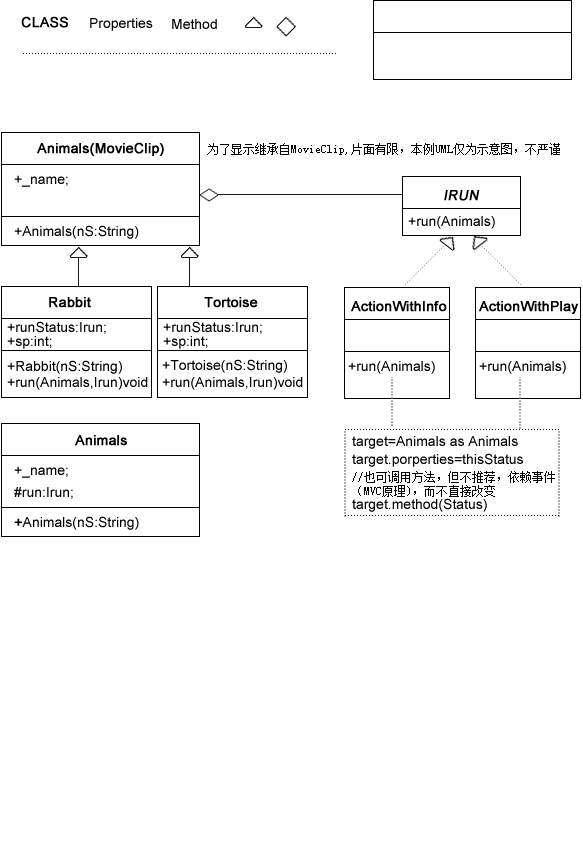
<style>
.page{position:relative;width:583px;height:850px;background:#ffffff}
.page>*{position:absolute;margin:0}
.t1{font:14px "ArialMT";color:#000000;font-weight:bold}
.t2{font:14px "ArialMT";color:#000000}
.t3{font:12px "SimSun";color:#000000}
.t4{font:14px "ArialMT";color:#000000;font-weight:bold;font-style:italic}
.t5{font:12px/14px "SimSun";color:#000000}
</style>
<div class="page">
<p class="t1" style="left:21px;top:16px;width:47px;height:12px">CLASS</p>
<p class="t2" style="left:90px;top:18px;width:63px;height:13px">Properties</p>
<p class="t2" style="left:172px;top:19px;width:45px;height:10px">Method</p>
<p class="t1" style="left:37px;top:142px;width:127px;height:14px">Animals(MovieClip)</p>
<p class="t3" style="left:207px;top:143px;width:353px;height:12px">为了显示继承自MovieClip,片面有限，本例UML仅为示意图，不严谨</p>
<p class="t2" style="left:14px;top:175px;width:54px;height:12px">+_name;</p>
<p class="t4" style="left:444px;top:190px;width:36px;height:11px">IRUN</p>
<p class="t2" style="left:408px;top:216px;width:87px;height:13px">+run(Animals)</p>
<p class="t2" style="left:14px;top:225px;width:125px;height:14px">+Animals(nS:String)</p>
<p class="t1" style="left:49px;top:297px;width:42px;height:11px">Rabbit</p>
<p class="t1" style="left:204px;top:297px;width:54px;height:11px">Tortoise</p>
<p class="t1" style="left:351px;top:301px;width:96px;height:11px">ActionWithInfo</p>
<p class="t1" style="left:479px;top:301px;width:99px;height:13px">ActionWithPlay</p>
<p class="t2" style="left:7px;top:321px;width:99px;height:13px">+runStatus:Irun;</p>
<p class="t2" style="left:163px;top:321px;width:99px;height:13px">+runStatus:Irun;</p>
<p class="t2" style="left:7px;top:336px;width:45px;height:13px">+sp:int;</p>
<p class="t2" style="left:163px;top:336px;width:45px;height:13px">+sp:int;</p>
<p class="t2" style="left:7px;top:360px;width:115px;height:14px">+Rabbit(nS:String)</p>
<p class="t2" style="left:162px;top:359px;width:125px;height:14px">+Tortoise(nS:String)</p>
<p class="t2" style="left:348px;top:361px;width:87px;height:13px">+run(Animals)</p>
<p class="t2" style="left:479px;top:361px;width:87px;height:13px">+run(Animals)</p>
<p class="t2" style="left:7px;top:377px;width:141px;height:13px">+run(Animals,Irun)void</p>
<p class="t2" style="left:162px;top:377px;width:141px;height:13px">+run(Animals,Irun)void</p>
<p class="t1" style="left:75px;top:435px;width:52px;height:11px">Animals</p>
<p class="t2" style="left:352px;top:436px;width:166px;height:13px">target=Animals as Animals</p>
<p class="t2" style="left:352px;top:453px;width:171px;height:14px">target.porperties=thisStatus</p>
<p class="t2" style="left:14px;top:466px;width:54px;height:12px">+_name;</p>
<p class="t5" style="left:352px;top:471px;width:203px;height:26px">//也可调用方法，但不推荐，依赖事件<br>（MVC原理)，而不直接改变</p>
<p class="t2" style="left:14px;top:487px;width:59px;height:12px">#run:Irun;</p>
<p class="t2" style="left:352px;top:498px;width:135px;height:14px">target.method(Status)</p>
<p class="t2" style="left:14px;top:516px;width:125px;height:14px"><span class="t1">+</span>Animals(nS:String)</p>
</div>
